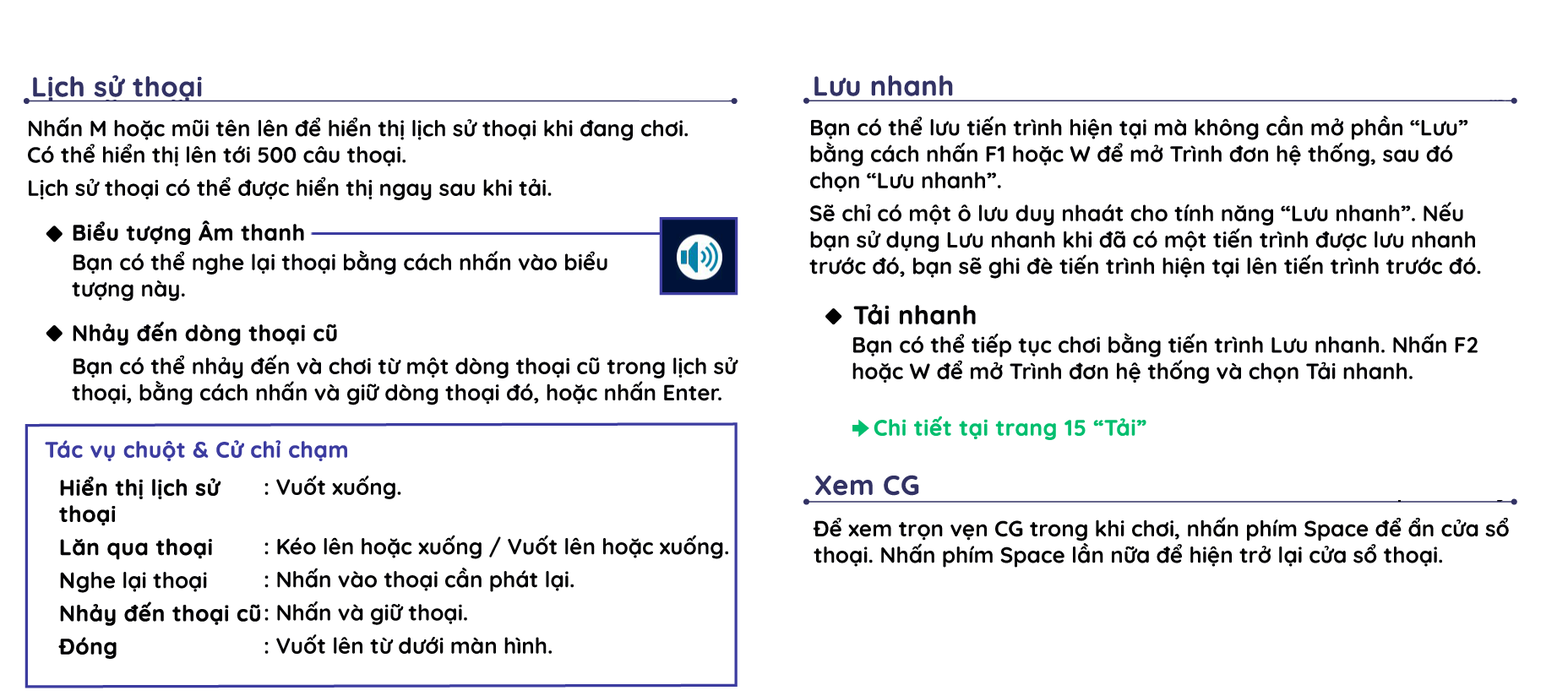
<style>
.page{position:relative;width:1568px;height:696px;background:#ffffff}
.page>*{position:absolute;margin:0}
.t1{font:27px "Quicksand-Bold";color:#323264;font-weight:bold}
.t2{font:22px "Quicksand-Bold";color:#020204}
.t3{font:22px "Quicksand-Bold";color:#020204;font-weight:bold}
.t4{font:25.3px "Quicksand-Bold";color:#020204;font-weight:bold}
.t5{font:22px "Quicksand-Bold";color:#00be6e;font-weight:bold}
.t6{font:22px "Quicksand-Bold";color:#3c3ca0;font-weight:bold}
.t7{font:22px "Quicksand-Bold";color:#020203;font-weight:bold}
.t8{font:22px "Quicksand-Bold";color:#020203}
.t9{font:22px "Quicksand-Bold";color:#000001}
</style>
<div class="page">
<p class="t1" style="left:33px;top:75px;width:169px;height:26px">Lịch sử thoại</p>
<p class="t1" style="left:814px;top:75px;width:139px;height:21px">Lưu nhanh</p>
<p class="t2" style="left:28px;top:117px;width:660px;height:83px">Nhấn M hoặc mũi tên lên để hiển thị lịch sử thoại khi đang chơi. <br>Có thể hiển thị lên tới 500 câu thoại.<br>Lịch sử thoại có thể được hiển thị ngay sau khi tải.</p>
<p class="t2" style="left:809px;top:116px;width:672px;height:163px">Bạn có thể lưu tiến trình hiện tại mà không cần mở phần “Lưu” bằng cách nhấn F1 hoặc W để mở Trình đơn hệ thống, sau đó chọn “Lưu nhanh”.<br>Sẽ chỉ có một ô lưu duy nhaát cho tính năng “Lưu nhanh”. Nếu bạn sử dụng Lưu nhanh khi đã có một tiến trình được lưu nhanh trước đó, bạn sẽ ghi đè tiến trình hiện tại lên tiến trình trước đó.</p>
<p class="t3" style="left:73px;top:220px;width:231px;height:25px">Biểu tượng Âm thanh</p>
<p class="t2" style="left:72px;top:250px;width:535px;height:52px">Bạn có thể nghe lại thoại bằng cách nhấn vào biểu tượng này.</p>
<p class="t4" style="left:853px;top:304px;width:123px;height:21px">Tải nhanh</p>
<p class="t2" style="left:72px;top:321px;width:666px;height:85px"><span class="t3">Nhảy đến dòng thoại cũ<br></span>Bạn có thể nhảy đến và chơi từ một dòng thoại cũ trong lịch sử thoại, bằng cách nhấn và giữ dòng thoại đó, hoặc nhấn Enter.</p>
<p class="t2" style="left:852px;top:333px;width:626px;height:51px">Bạn có thể tiếp tục chơi bằng tiến trình Lưu nhanh. Nhấn F2 hoặc W để mở Trình đơn hệ thống và chọn Tải nhanh.</p>
<p class="t5" style="left:874px;top:416px;width:272px;height:24px">Chi tiết tại trang 15 “Tải”</p>
<p class="t6" style="left:45px;top:440px;width:302px;height:21px">Tác vụ chuột &amp; Cử chỉ chạm</p>
<p class="t7" style="left:58px;top:476px;width:202px;height:183px">Hiển thị lịch sử thoại<br>Lăn qua thoại<br>N<span class="t2">ghe lại thoại<br></span>Nhảy đến thoại cũ<br>Đóng</p>
<p class="t8" style="left:264px;top:476px;width:464px;height:178px">: Vuốt xuống.<br><br>: Kéo lên hoặc xuống / Vuốt lên hoặc xuống.<br>: Nhấn vào thoại cần phát lại.<br>: Nhấn và giữ thoại.<br>: Vuốt lên từ dưới màn hình.</p>
<p class="t1" style="left:815px;top:475px;width:104px;height:21px">Xem CG</p>
<p class="t9" style="left:813px;top:517px;width:696px;height:51px">Để xem trọn vẹn CG trong khi chơi, nhấn phím Space để ẩn cửa sổ thoại. Nhấn phím Space lần nữa để hiện trở lại cửa sổ thoại.</p>
</div>
